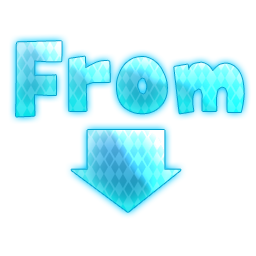
<style>
.page{position:relative;width:256px;height:256px;background:#ffffff}
.page>*{position:absolute;margin:0}
.t1{font:89.2px "KFhimajiKIDS";scale:0.95 1}
</style>
<div class="page">
<p class="t1" style="left:16px;top:41px;width:228px;height:76px">From</p>
</div>
